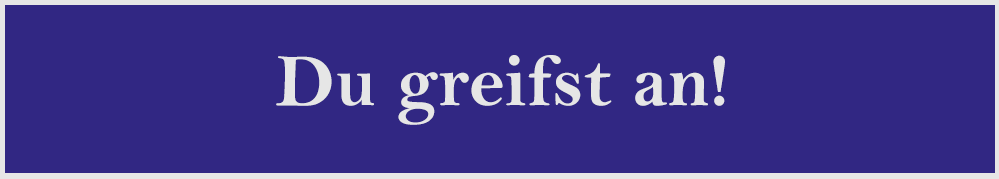
<style>
.page{position:relative;width:999px;height:179px;background:#312783}
.page>*{position:absolute;margin:0}
.t1{font:75px "BellMTBold";color:#e6e6e6}
</style>
<div class="page">
<p class="t1" style="left:276px;top:55px;width:449px;height:70px">Du greifst an!</p>
</div>
